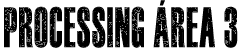
<style>
.page{position:relative;width:240px;height:48px;background:#ffffff}
.page>*{position:absolute;margin:0}
.t1{font:57px "Haettenschweiler";letter-spacing:0.035em;color:#000000;scale:0.63 1}
</style>
<div class="page">
<p class="t1" style="left:4px;top:0px;width:234px;height:48px">PROCESSING ÁREA 3</p>
</div>
